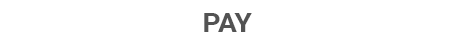
<style>
.page{position:relative;width:456px;height:43px;background:#ffffff}
.page>*{position:absolute;margin:0}
.t1{font:26.6px "Roboto-Bold";color:#535353;scale:1.05 1}
</style>
<div class="page">
<p class="t1" style="left:204px;top:13px;width:48px;height:19px">PAY</p>
</div>
